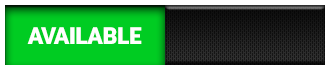
<style>
.page{position:relative;width:331px;height:70px;background:#ffffff}
.page>*{position:absolute;margin:0}
.t1{font:24px "Antartida-Black";color:#ffffff}
</style>
<div class="page">
<p class="t1" style="left:27px;top:27px;width:115px;height:17px">AVAILABLE</p>
</div>
